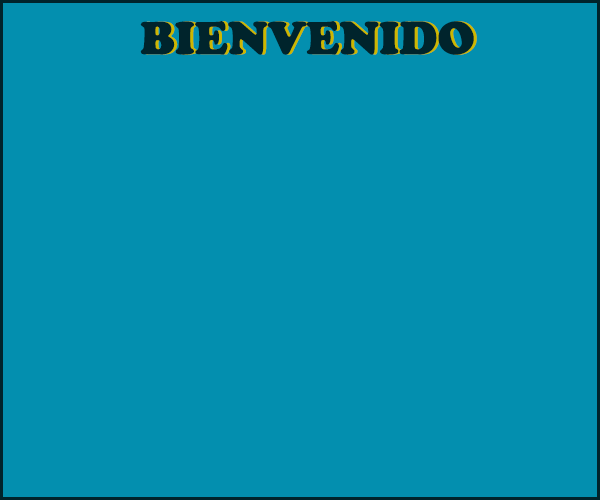
<style>
.page{position:relative;width:600px;height:500px;background:#038faf}
.page>*{position:absolute;margin:0}
.t1{font:48px "CooperBlack";color:#00242c}
</style>
<div class="page">
<p class="t1" style="left:140px;top:21px;width:334px;height:34px">BIENVENIDO</p>
<p class="t1" style="left:143px;top:21px;width:334px;height:34px">BIENVENIDOP</p>
</div>
